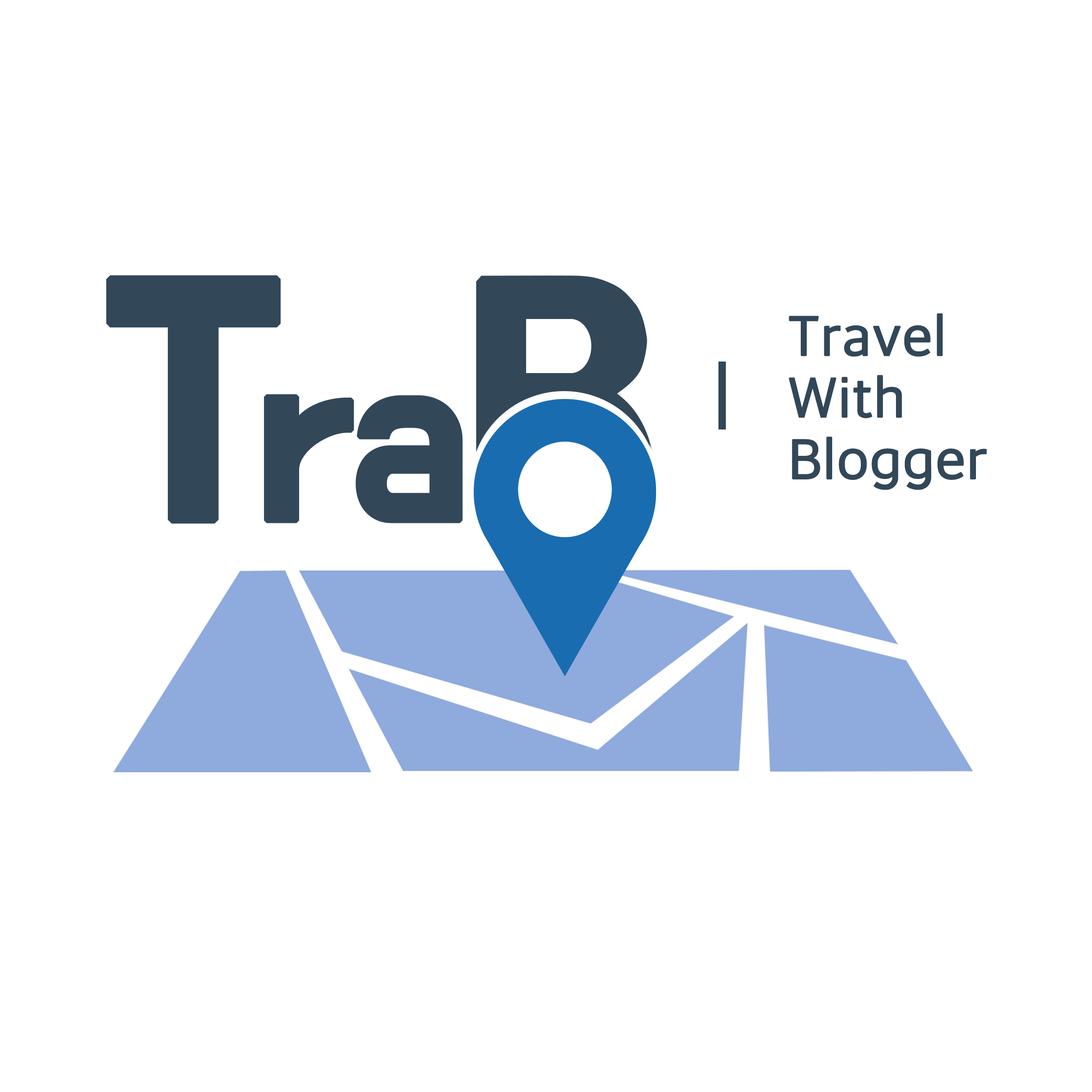
<style>
.page{position:relative;width:1092px;height:1092px;background:#ffffff}
.page>*{position:absolute;margin:0}
.t1{font:51.4px/61.6px "KHNPHURegular";color:#324758;font-weight:bold}
</style>
<div class="page">
<p class="t1" style="left:789px;top:313px;width:198px;height:177px">Travel<br>With<br>Blogger</p>
</div>
